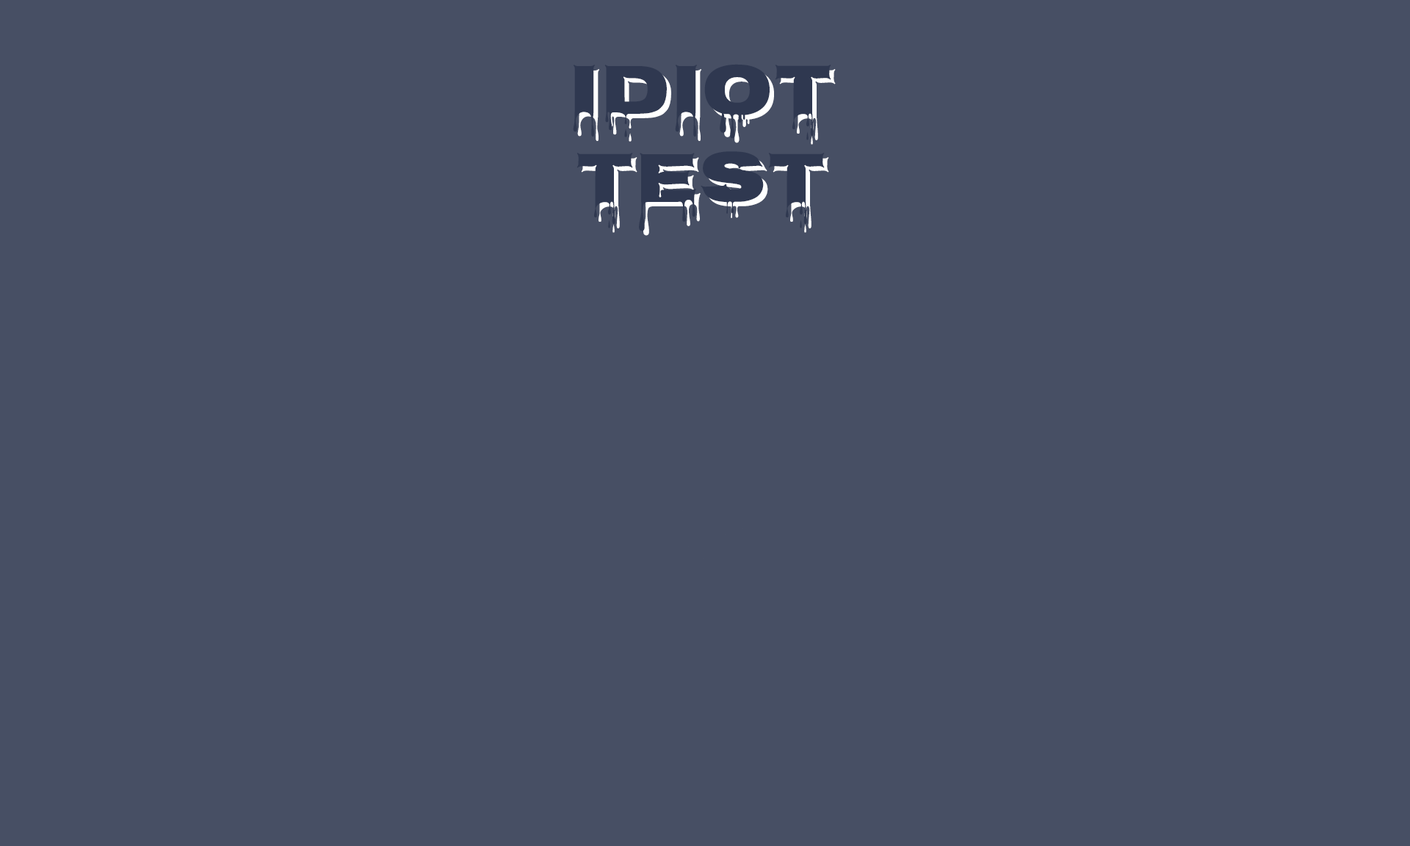
<style>
.page{position:relative;width:1410px;height:846px;background:#474f64}
.page>*{position:absolute;margin:0}
.t1{font:73.4px "Nosifer-Regular";color:#2f3850}
</style>
<div class="page">
<p class="t1" style="left:573px;top:64px;width:258px;height:167px;text-align:center">IDIOT<br>TEST</p>
</div>
